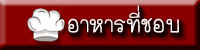
<style>
.page{position:relative;width:200px;height:50px;background:#8a0000}
.page>*{position:absolute;margin:0}
.t1{font:36px "THMaliGrade6-Bold";color:#fefefe}
</style>
<div class="page">
<p class="t1" style="left:68px;top:5px;width:111px;height:28px">อาหารที่ชอบ</p>
</div>
